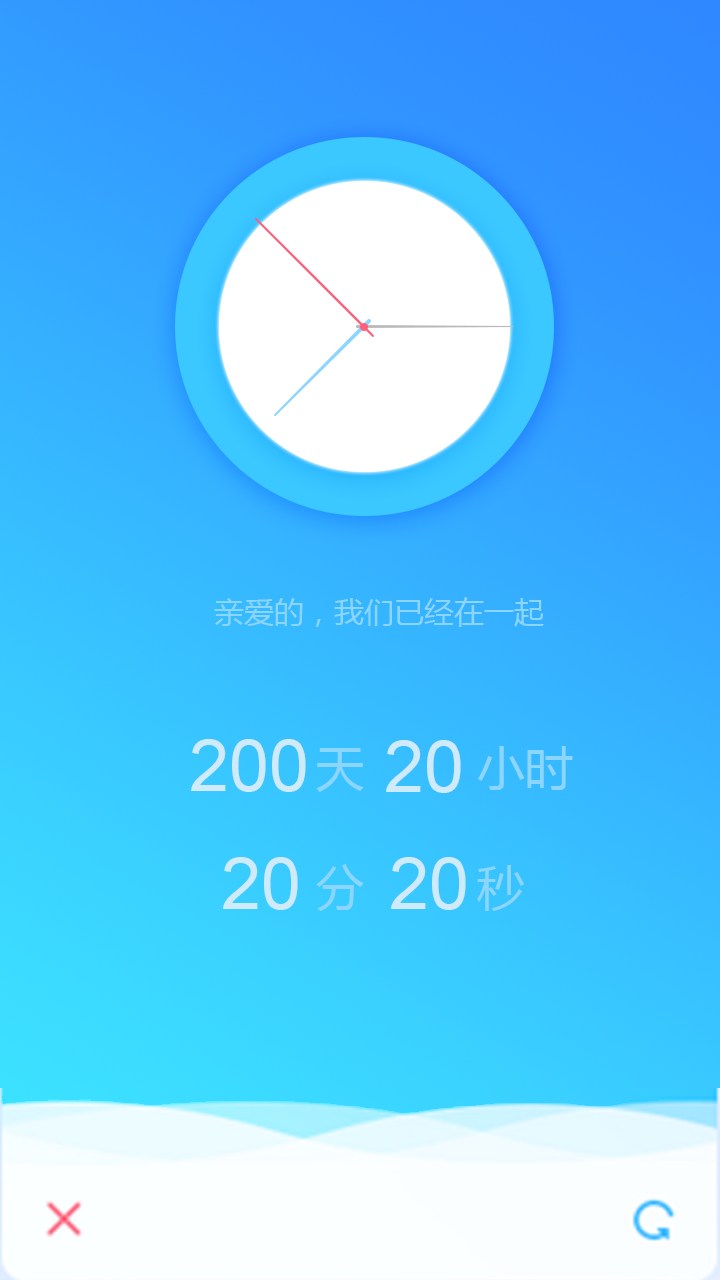
<style>
.page{position:relative;width:720px;height:1280px}
.page>*{position:absolute;margin:0}
.t1{font:30px "MicrosoftYaHei";color:#8cd5ff}
.t2{font:72px "ArialMT";color:#ceeafb}
.t3{font:48px/60px "MicrosoftYaHei";color:#8cd5ff}
</style>
<div class="page">
<p class="t1" style="left:214px;top:597px;width:330px;height:30px">亲爱的，我们已经在一起</p>
<p class="t2" style="left:191px;top:739px;width:115px;height:53px">200</p>
<p class="t3" style="left:316px;top:746px;width:257px;height:165px">天        小时<br><br>分        秒</p>
<p class="t2" style="left:386px;top:740px;width:75px;height:53px">20</p>
<p class="t2" style="left:223px;top:857px;width:75px;height:53px">20</p>
<p class="t2" style="left:391px;top:857px;width:75px;height:53px">20</p>
</div>
